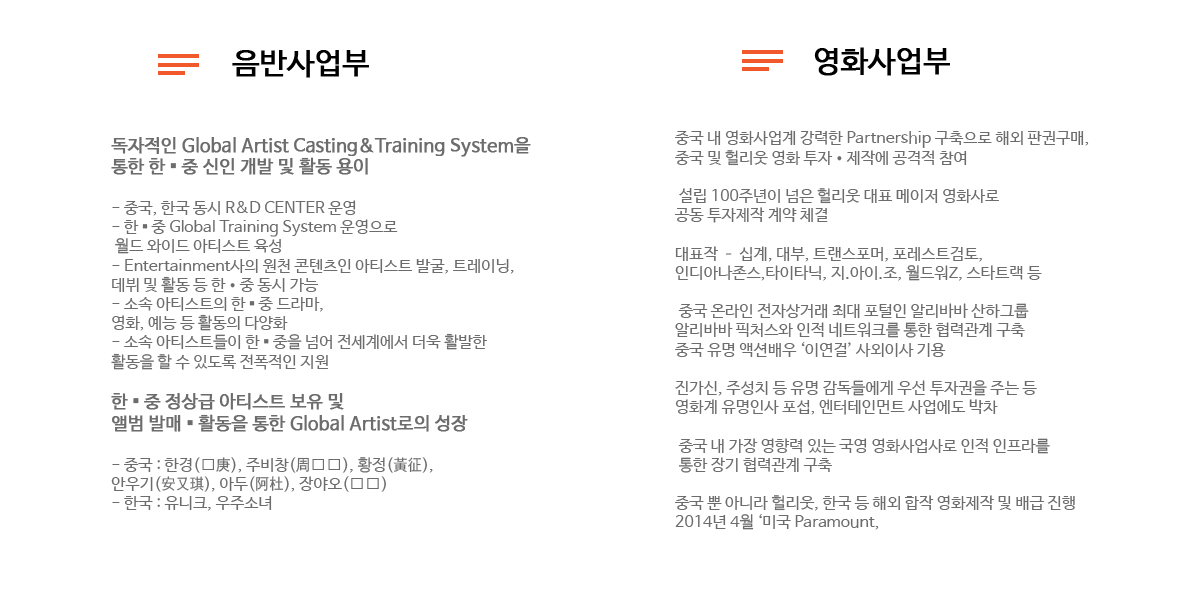
<style>
.page{position:relative;width:1200px;height:600px;background:#ffffff}
.page>*{position:absolute;margin:0}
.t1{font:30px "NanumBarunGothic";color:#000000;font-weight:bold}
.t2{font:16px "NanumBarunGothic";color:#6d6c6c}
.t3{font:18px/6px "NanumBarunGothic";color:#6d6c6c;font-weight:bold}
.t4{font:18px "NanumBarunGothic";color:#6d6c6c;font-weight:bold}
.t5{font:18px "Gulim";color:#6d6c6c;font-weight:bold}
.t6{font:16px "Gulim";color:#6d6c6c}
</style>
<div class="page">
<p class="t1" style="left:232px;top:50px;width:137px;height:28px">음반사업부</p>
<p class="t1" style="left:814px;top:47px;width:136px;height:29px">영화사업부</p>
<p class="t2" style="left:111px;top:137px;width:420px;height:374px"><span class="t3">독자적인 </span><span class="t4">Global Artist Casting&amp;Training System을<br>통한 한 </span><span class="t5">▪</span><span class="t4"> 중 신인 개발 및 활동 용이<br><br></span>- 중국, 한국 동시 R&amp;D CENTER 운영 <br>- 한 <span class="t6">▪</span> 중 Global Training System 운영으로<br> 월드 와이드 아티스트 육성<br>- Entertainment사의 원천 콘텐츠인 아티스트 발굴, 트레이닝, <br>데뷔 및 활동 등 한•중 동시 가능<br>- 소속 아티스트의 한 <span class="t6">▪</span> 중 드라마, <br>영화, 예능 등 활동의 다양화<br>- 소속 아티스트들이 한 <span class="t6">▪</span> 중을 넘어 전세계에서 더욱 활발한 <br>활동을 할 수 있도록 전폭적인 지원<br><br><span class="t4">한 </span><span class="t5">▪</span><span class="t4"> 중 정상급 아티스트 보유 및 <br>앨범 발매 </span><span class="t5">▪</span><span class="t4"> 활동을 통한 Global Artist로의 성장<br><br></span>- 중국 : 한경(<span class="t6">韩</span>庚), 주비창(周<span class="t6">笔畅</span>), 황정(黃征), <br>안우기(安又琪), 아두(阿杜), 장야오(<span class="t6">张瑶</span>)<br>- 한국 : 유니크, 우주소녀</p>
<p class="t2" style="left:675px;top:130px;width:414px;height:400px">중국 내 영화사업계 강력한 Partnership 구축으로 해외 판권구매, <br>중국 및 헐리웃 영화 투자•제작에 공격적 참여<br><br> 설립 100주년이 넘은 헐리웃 대표 메이저 영화사로 <br>공동 투자제작 계약 체결<br><br>대표작 – 십계, 대부, 트랜스포머, 포레스트검토, <br>인디아나존스,타이타닉, 지.아이.조, 월드워Z, 스타트랙 등<br><br> 중국 온라인 전자상거래 최대 포털인 알리바바 산하그룹 <br>알리바바 픽처스와 인적 네트워크를 통한 협력관계 구축<br>중국 유명 액션배우 ‘이연걸’ 사외이사 기용<br><br>진가신, 주성치 등 유명 감독들에게 우선 투자권을 주는 등 <br>영화계 유명인사 포섭, 엔터테인먼트 사업에도 박차<br><br> 중국 내 가장 영향력 있는 국영 영화사업사로 인적 인프라를<br> 통한 장기 협력관계 구축<br><br>중국 뿐 아니라 헐리웃, 한국 등 해외 합작 영화제작 및 배급 진행<br>2014년 4월 ‘미국 Paramount,</p>
</div>
